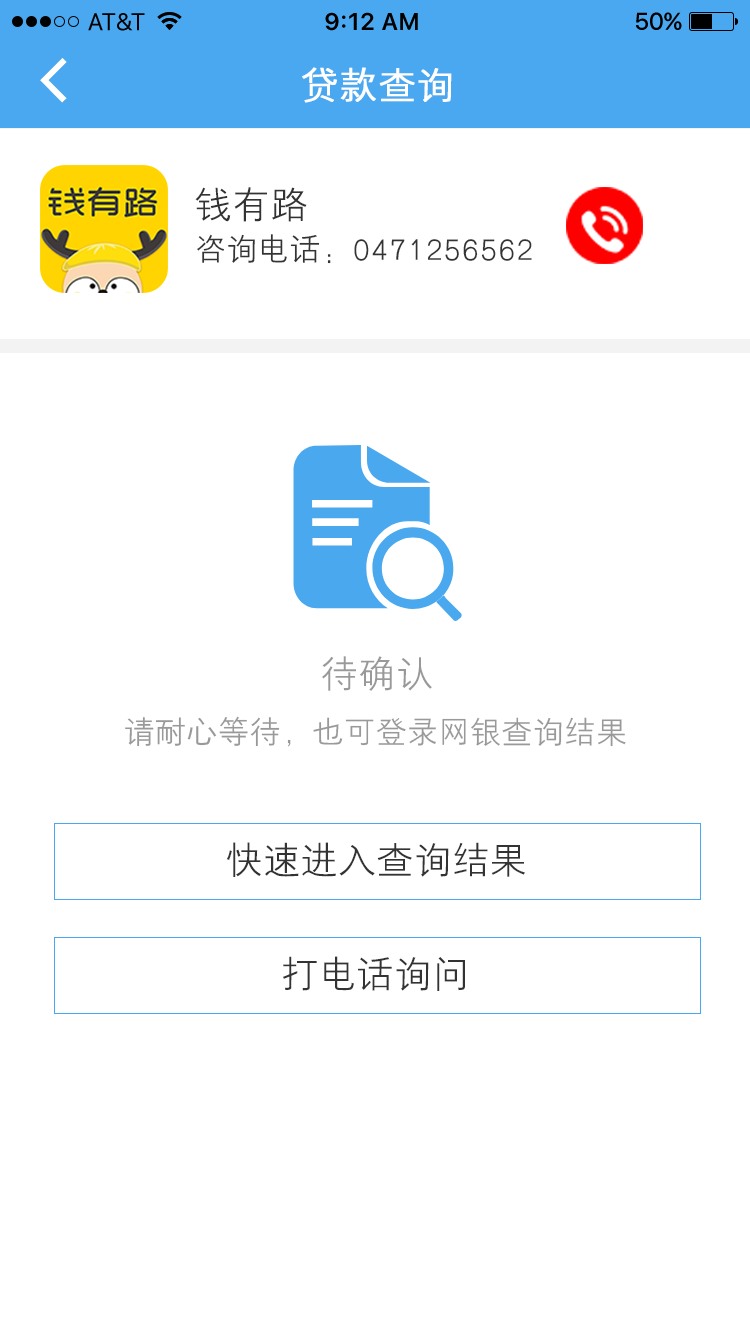
<style>
.page{position:relative;width:750px;height:1334px;background:#ffffff}
.page>*{position:absolute;margin:0}
.t1{font:36px "HYZhongJianHeiJ";letter-spacing:0.05em;color:#ffffff;font-weight:bold}
.t2{font:36px "HYZhongJianHeiJ";letter-spacing:0.05em;color:#333333}
.t3{font:30px "HYZhongJianHeiJ";letter-spacing:0.05em;color:#333333}
.t4{font:36px "HYZhongJianHeiJ";letter-spacing:0.05em;color:#999999}
.t5{font:30px "HYZhongJianHeiJ";letter-spacing:0.05em;color:#999999}
</style>
<div class="page">
<p class="t1" style="left:302px;top:67px;width:150px;height:36px">贷款查询</p>
<p class="t2" style="left:195px;top:187px;width:112px;height:35px">钱有路</p>
<p class="t3" style="left:197px;top:234px;width:335px;height:30px">咨询电话：0471256562</p>
<p class="t4" style="left:322px;top:656px;width:110px;height:35px">待确认</p>
<p class="t5" style="left:125px;top:716px;width:501px;height:31px">请耐心等待，也可登录网银查询结果</p>
<p class="t2" style="left:226px;top:842px;width:299px;height:35px">快速进入查询结果</p>
<p class="t2" style="left:283px;top:956px;width:182px;height:35px">打电话询问</p>
</div>
